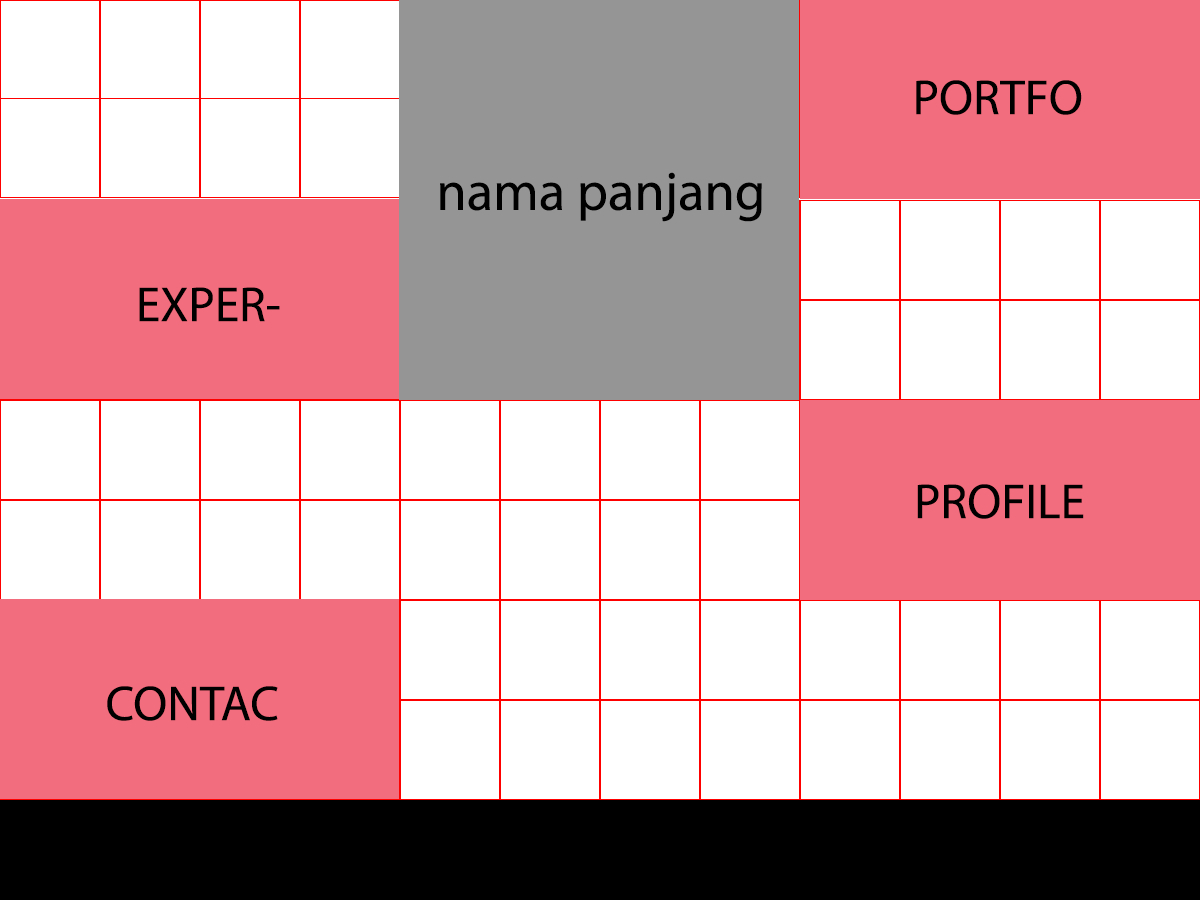
<style>
.page{position:relative;width:1200px;height:900px;background:#ffffff}
.page>*{position:absolute;margin:0}
.t1{font:49.5px "MyriadPro-Regular";color:#000000}
.t2{font:54.8px "MyriadPro-Regular";color:#000000}
</style>
<div class="page">
<p class="t1" style="left:916px;top:80px;width:166px;height:35px">PORTFO</p>
<p class="t2" style="left:440px;top:172px;width:322px;height:50px">nama panjang</p>
<p class="t1" style="left:139px;top:287px;width:141px;height:35px">EXPER-</p>
<p class="t1" style="left:917px;top:484px;width:167px;height:35px">PROFILE</p>
<p class="t1" style="left:107px;top:686px;width:171px;height:35px">CONTAC</p>
</div>
